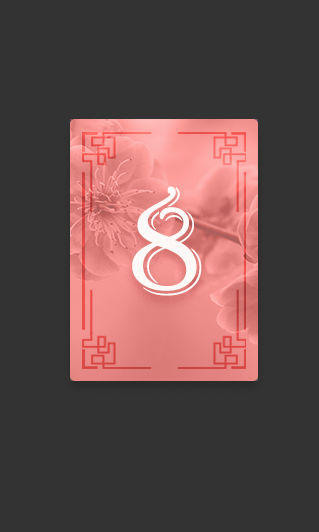
<style>
.page{position:relative;width:319px;height:532px;background:#333333}
.page>*{position:absolute;margin:0}
.t1{font:129.2px "Algerian";letter-spacing:0.1em;color:#fef8f7;text-transform:uppercase}
</style>
<div class="page">
<p class="t1" style="left:132px;top:186px;width:70px;height:110px">8</p>
</div>
